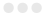
<style>
.page{position:relative;width:45px;height:16px;background:#ffffff}
.page>*{position:absolute;margin:0}
.t1{font:48px "Helvetica";letter-spacing:-0.065em;color:#e8e8e8}
</style>
<div class="page">
<p class="t1" style="left:3px;top:2px;width:39px;height:11px">•••</p>
</div>
